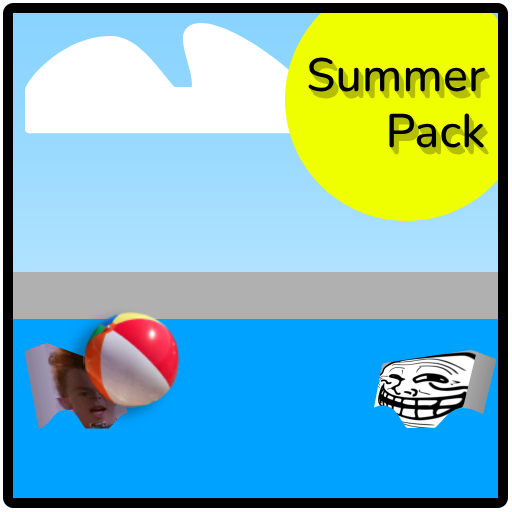
<style>
.page{position:relative;width:512px;height:512px;background:#00a2ff}
.page>*{position:absolute;margin:0}
.t1{font:47px "Nunito-Medium";color:#000000}
</style>
<div class="page">
<p class="t1" style="left:308px;top:57px;width:177px;height:91px;text-align:right">Summer<br>Pack</p>
</div>
